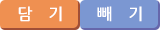
<style>
.page{position:relative;width:160px;height:30px;background:#ef9051}
.page>*{position:absolute;margin:0}
.t1{font:16px "NanumGothicBold";letter-spacing:1em;color:#ffffff}
</style>
<div class="page">
<p class="t1" style="left:18px;top:6px;width:44px;height:16px">담기</p>
<p class="t1" style="left:97px;top:6px;width:45px;height:16px">빼기</p>
</div>
